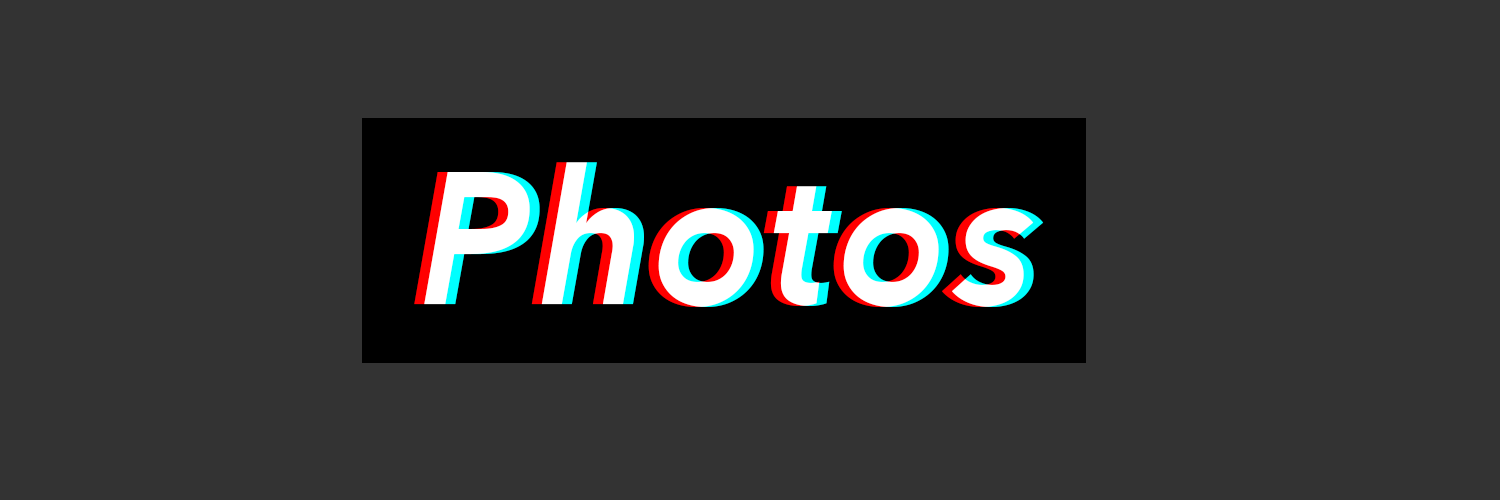
<style>
.page{position:relative;width:1500px;height:500px;background:#333333}
.page>*{position:absolute;margin:0}
.t1{font:187px "AvenirNext-BoldItalic";color:#ffffff}
</style>
<div class="page">
<p class="t1" style="left:414px;top:162px;width:620px;height:145px">Photos</p>
<p class="t1" style="left:424px;top:162px;width:620px;height:145px">Photos</p>
</div>
